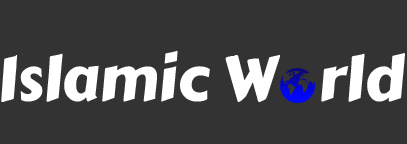
<style>
.page{position:relative;width:407px;height:144px;background:#333333}
.page>*{position:absolute;margin:0}
.t1{font:46.3px "CarterOne";color:#ffffff}
</style>
<div class="page">
<p class="t1" style="left:1px;top:50px;width:404px;height:52px">Islamic W   rld</p>
</div>
